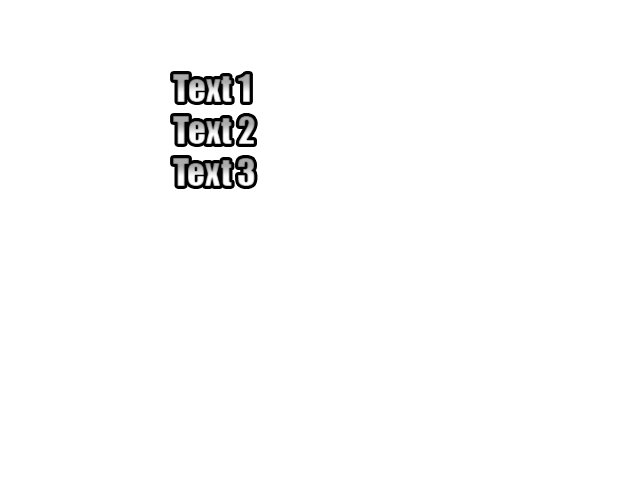
<style>
.page{position:relative;width:640px;height:480px;background:#ffffff}
.page>*{position:absolute;margin:0}
.t1{font:35px "Impact"}
</style>
<div class="page">
<p class="t1" style="left:173px;top:74px;width:77px;height:28px">Text 1</p>
<p class="t1" style="left:173px;top:116px;width:82px;height:28px">Text 2</p>
<p class="t1" style="left:173px;top:158px;width:82px;height:28px">Text 3</p>
</div>
